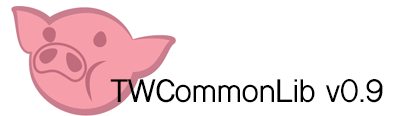
<style>
.page{position:relative;width:400px;height:116px;background:#ffffff}
.page>*{position:absolute;margin:0}
.t1{font:30px "ShreeDev0714-Bold";color:#000000}
</style>
<div class="page">
<p class="t1" style="left:110px;top:79px;width:273px;height:24px">TWCommonLib v0.9</p>
</div>
